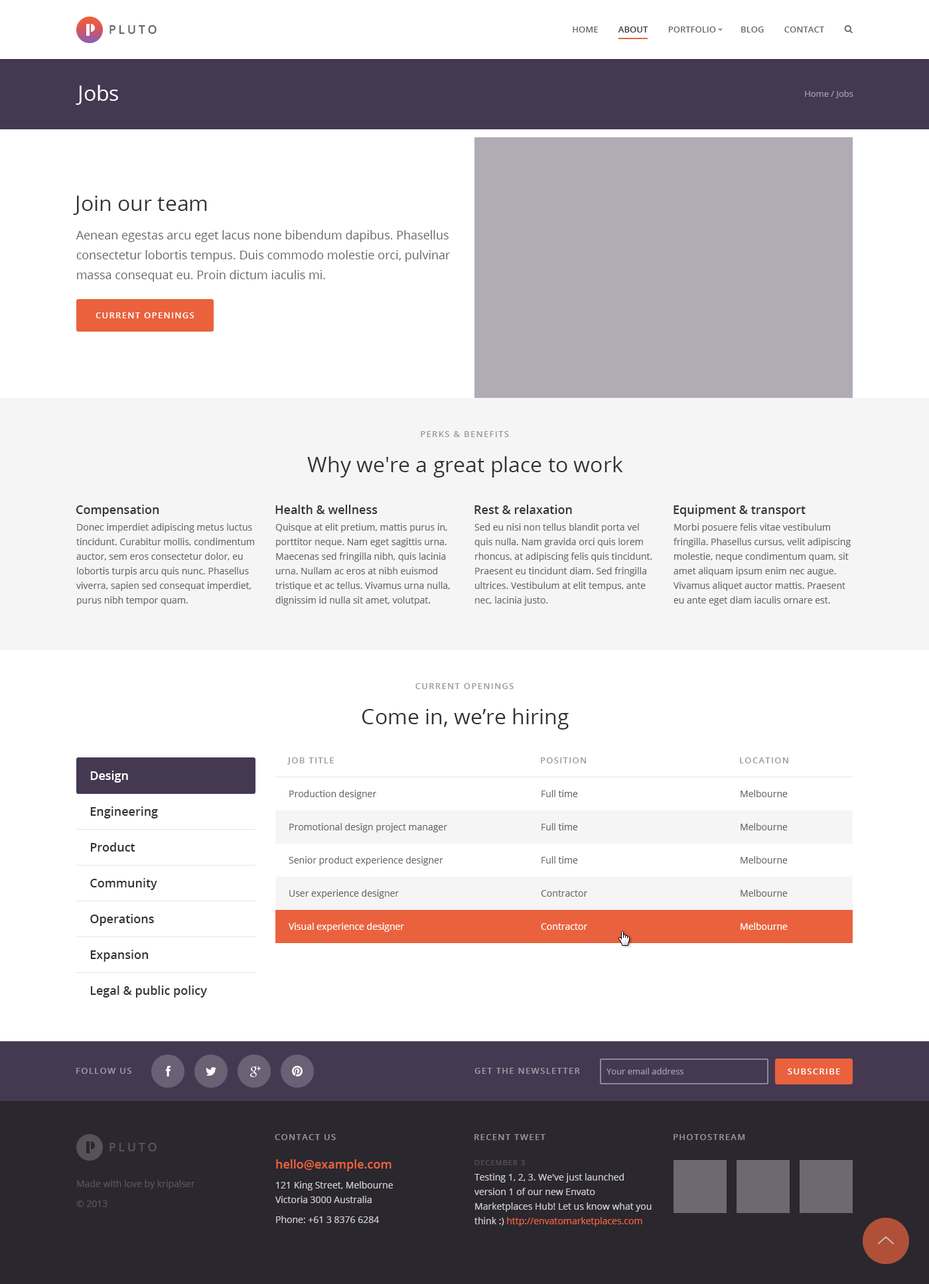
<style>
.page{position:relative;width:929px;height:1284px;background:#ffffff}
.page>*{position:absolute;margin:0}
.t1{font:11.9px "OpenSans-Semibold";letter-spacing:0.2em;color:#666666;text-transform:uppercase}
.t2{font:8.6px "OpenSans-Semibold";color:#666666;text-transform:uppercase}
.t3{font:8.6px "OpenSans-Semibold";color:#333333;text-transform:uppercase}
.t4{font:21.2px "OpenSans";color:#ffffff}
.t5{font:8.6px "OpenSans";color:#a09ca4}
.t6{font:21.2px "OpenSans";color:#333333}
.t7{font:11.9px/19.9px "OpenSans";color:#666666}
.t8{font:8.6px "OpenSans-Semibold";letter-spacing:0.1em;color:#ffffff;text-transform:uppercase}
.t9{font:8.6px "OpenSans-Semibold";letter-spacing:0.1em;color:#999999;text-transform:uppercase}
.t10{font:11.9px "OpenSans-Semibold";color:#333333}
.t11{font:9.3px/14.6px "OpenSans";color:#666666}
.t12{font:11.9px/35.8px "OpenSans-Semibold";color:#333333}
.t13{font:11.9px/35.8px "OpenSans-Semibold";color:#ffffff}
.t14{font:9.3px/33.2px "OpenSans";color:#666666}
.t15{font:9.3px/33.2px "OpenSans";color:#ffffff}
.t16{font:8.6px "OpenSans-Semibold";letter-spacing:0.1em;color:#a09ca4;text-transform:uppercase}
.t17{font:11.9px "OpenSans-Semibold";letter-spacing:0.2em;color:#555258;text-transform:uppercase}
.t18{font:8.6px "OpenSans-Semibold";letter-spacing:0.1em;color:#979698;text-transform:uppercase}
.t19{font:9.3px/19.9px "OpenSans";color:#cccccc}
.t20{font:11.9px/15.9px "OpenSans-Semibold";color:#ea623d}
.t21{font:9.3px/14.6px "OpenSans";color:#cccccc}
.t22{font:7.3px "OpenSans";letter-spacing:0.1em;color:#545158;text-transform:uppercase}
.t23{font:9.3px/19.9px "OpenSans";color:#555258}
.t24{font:9.3px/15.3px "OpenSans";color:#cccccc}
.t25{font:9.3px/14.6px "OpenSans";color:#ea623d}
</style>
<div class="page">
<p class="t1" style="left:109px;top:25px;width:48px;height:9px">Pluto</p>
<p class="t2" style="left:572px;top:27px;width:252px;height:6px">Home         <span class="t3">About         </span>Portfolio           Blog         Contact</p>
<p class="t4" style="left:76px;top:85px;width:42px;height:20px">Jobs</p>
<p class="t5" style="left:805px;top:90px;width:48px;height:8px">Home / Jobs</p>
<p class="t6" style="left:73px;top:196px;width:134px;height:19px">Join our team</p>
<p class="t7" style="left:76px;top:230px;width:374px;height:52px">Aenean egestas arcu eget lacus none bibendum dapibus. Phasellus consectetur lobortis tempus. Duis commodo molestie orci, pulvinar massa consequat eu. Proin dictum iaculis mi.</p>
<p class="t8" style="left:96px;top:312px;width:98px;height:6px">Current openings</p>
<p class="t9" style="left:421px;top:431px;width:88px;height:6px">Perks &amp; benefits</p>
<p class="t6" style="left:307px;top:456px;width:316px;height:22px">Why we're a great place to work</p>
<p class="t10" style="left:76px;top:505px;width:83px;height:12px">Compensation</p>
<p class="t10" style="left:275px;top:505px;width:102px;height:9px">Health &amp; wellness</p>
<p class="t10" style="left:474px;top:505px;width:98px;height:9px">Rest &amp; relaxation</p>
<p class="t10" style="left:673px;top:505px;width:132px;height:12px">Equipment &amp; transport</p>
<p class="t11" style="left:76px;top:523px;width:178px;height:83px">Donec imperdiet adipiscing metus luctus tincidunt. Curabitur mollis, condimentum auctor, sem eros consectetur dolor, eu lobortis turpis arcu quis nunc. Phasellus viverra, sapien sed consequat imperdiet, purus nibh tempor quam.</p>
<p class="t11" style="left:275px;top:523px;width:175px;height:83px">Quisque at elit pretium, mattis purus in, porttitor neque. Nam eget sagittis urna. Maecenas sed fringilla nibh, quis lacinia urna. Nullam ac eros at nibh euismod tristique et ac tellus. Vivamus urna nulla, dignissim id nulla sit amet, volutpat.</p>
<p class="t11" style="left:474px;top:523px;width:178px;height:83px">Sed eu nisi non tellus blandit porta vel quis nulla. Nam gravida orci quis lorem rhoncus, at adipiscing felis quis tincidunt. Praesent eu tincidunt diam. Sed fringilla ultrices. Vestibulum at elit tempus, ante nec, lacinia justo.</p>
<p class="t11" style="left:673px;top:523px;width:177px;height:83px">Morbi posuere felis vitae vestibulum fringilla. Phasellus cursus, velit adipiscing molestie, neque condimentum quam, sit amet aliquam ipsum enim nec augue. Vivamus aliquet auctor mattis. Praesent eu ante eget diam iaculis ornare est.</p>
<p class="t9" style="left:415px;top:683px;width:98px;height:6px">Current openings</p>
<p class="t6" style="left:362px;top:708px;width:206px;height:22px">Come in, we’re hiring</p>
<p class="t9" style="left:287px;top:757px;width:47px;height:8px">Job title</p>
<p class="t9" style="left:541px;top:757px;width:45px;height:6px">Position</p>
<p class="t9" style="left:740px;top:757px;width:48px;height:6px">Location</p>
<p class="t12" style="left:90px;top:771px;width:117px;height:227px"><span class="t13">Design<br></span>Engineering<br>Product<br>Community<br>Operations<br>Expansion<br>Legal &amp; public policy</p>
<p class="t14" style="left:289px;top:790px;width:158px;height:142px">Production designer<br>Promotional design project manager<br>Senior product experience designer<br>User experience designer<br><span class="t15">Visual experience designer</span></p>
<p class="t14" style="left:541px;top:790px;width:47px;height:140px">Full time<br>Full time<br>Full time<br>Contractor<br><span class="t15">Contractor</span></p>
<p class="t14" style="left:740px;top:790px;width:47px;height:140px">Melbourne<br>Melbourne<br>Melbourne<br>Melbourne<br><span class="t15">Melbourne</span></p>
<p class="t16" style="left:76px;top:1068px;width:55px;height:6px">Follow us</p>
<p class="t16" style="left:474px;top:1068px;width:106px;height:6px">Get the newsletter</p>
<p class="t5" style="left:606px;top:1068px;width:77px;height:7px">Your email address</p>
<p class="t8" style="left:787px;top:1069px;width:53px;height:6px">Subscribe</p>
<p class="t17" style="left:109px;top:1143px;width:48px;height:8px">Pluto</p>
<p class="t18" style="left:275px;top:1134px;width:61px;height:6px">Contact us</p>
<p class="t18" style="left:474px;top:1134px;width:71px;height:6px">Recent tweet</p>
<p class="t18" style="left:673px;top:1134px;width:72px;height:6px">Photostream</p>
<p class="t19" style="left:275px;top:1159px;width:118px;height:64px"><span class="t20">hello@example.com<br></span>121 King Street, Melbourne <br><span class="t21">Victoria 3000 Australia<br></span>Phone: +61 3 8376 6284</p>
<p class="t22" style="left:474px;top:1160px;width:51px;height:5px">December 3</p>
<p class="t23" style="left:76px;top:1180px;width:119px;height:27px">Made with love by kripalser<br>© 2013</p>
<p class="t21" style="left:474px;top:1173px;width:177px;height:53px"><span class="t24">Testing 1, 2, 3. We've just launched </span>version 1 of our new Envato Marketplaces Hub! Let us know what you think :) <span class="t25">http://envatomarketplaces.com</span></p>
</div>
